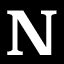
<style>
.page{position:relative;width:64px;height:64px;background:#000000}
.page>*{position:absolute;margin:0}
.t1{font:60px "Superclarendon-Regular";color:#ffffff}
</style>
<div class="page">
<p class="t1" style="left:7px;top:10px;width:50px;height:45px">N</p>
</div>
